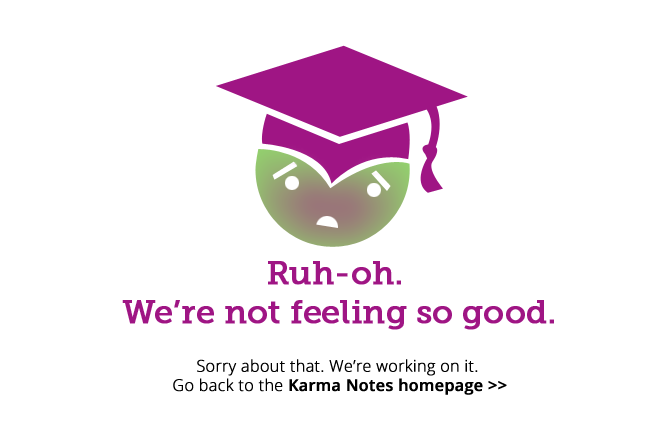
<style>
.page{position:relative;width:670px;height:428px;background:#ffffff}
.page>*{position:absolute;margin:0}
.t1{font:32.4px "MuseoSlab-500";color:#9f1584;font-weight:bold}
.t2{font:16px "OpenSans-Light";color:#000000;font-weight:bold}
.t3{font:16px "OpenSans-Semibold";color:#000000;font-weight:bold}
</style>
<div class="page">
<p class="t1" style="left:122px;top:261px;width:432px;height:69px;text-align:center">Ruh-oh. <br>We’re not feeling so good.</p>
<p class="t2" style="left:173px;top:359px;width:334px;height:36px;text-align:center">Sorry about that. We’re working on it. <br>Go back to the <span class="t3">Karma Notes homepage &gt;&gt;</span></p>
</div>
